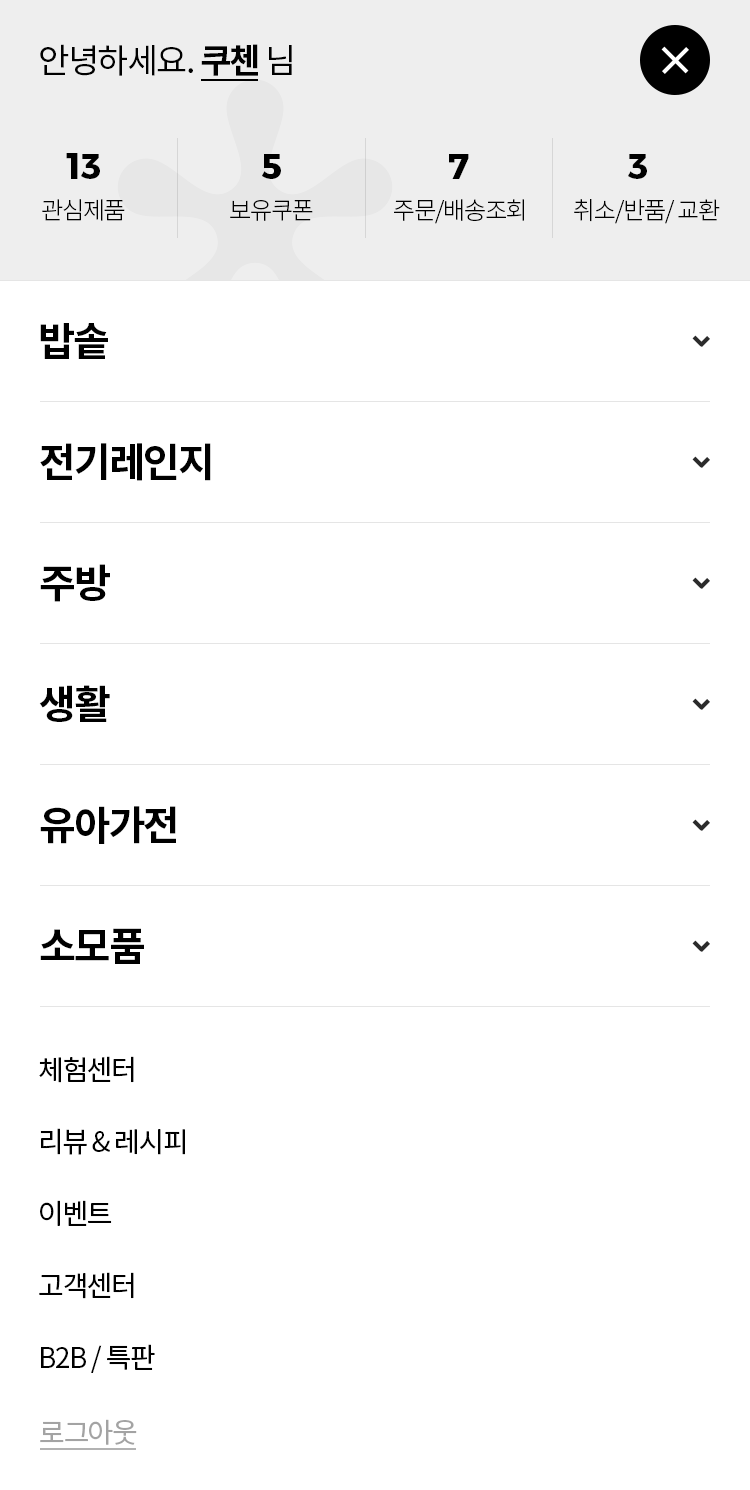
<style>
.page{position:relative;width:750px;height:1490px;background:#ffffff}
.page>*{position:absolute;margin:0}
.t1{font:34px "NotoSansCJKkr-Regular";letter-spacing:-0.05em;color:#000000}
.t2{font:34px "NotoSansCJKkr-Bold";letter-spacing:-0.05em;color:#000000}
.t3{font:36px "Montserrat-Bold";color:#000000}
.t4{font:24px "NotoSansCJKkr-Light";letter-spacing:-0.05em;color:#000000}
.t5{font:40px "NotoSansCJKkr-Bold";letter-spacing:-0.05em;color:#000000}
.t6{font:28px/72px "NotoSansCJKkr-Regular";letter-spacing:-0.05em;color:#000000}
.t7{font:28px "NotoSansCJKkr-Regular";letter-spacing:-0.05em;color:#a3a3a3}
</style>
<div class="page">
<p class="t1" style="left:40px;top:44px;width:252px;height:32px">안녕하세요. <span class="t2">쿠첸 </span>님</p>
<p class="t3" style="left:66px;top:153px;width:34px;height:26px">13</p>
<p class="t3" style="left:262px;top:154px;width:19px;height:25px">5</p>
<p class="t3" style="left:449px;top:154px;width:20px;height:25px">7</p>
<p class="t3" style="left:628px;top:154px;width:19px;height:25px">3</p>
<p class="t4" style="left:42px;top:199px;width:83px;height:22px">관심제품</p>
<p class="t4" style="left:230px;top:200px;width:83px;height:21px">보유쿠폰</p>
<p class="t4" style="left:394px;top:199px;width:130px;height:25px">주문/배송조회</p>
<p class="t4" style="left:574px;top:199px;width:146px;height:25px">취소/반품/ 교환</p>
<p class="t5" style="left:40px;top:323px;width:68px;height:36px">밥솥</p>
<p class="t5" style="left:40px;top:443px;width:171px;height:38px">전기레인지</p>
<p class="t5" style="left:40px;top:564px;width:70px;height:38px">주방</p>
<p class="t5" style="left:39px;top:685px;width:71px;height:37px">생활</p>
<p class="t5" style="left:40px;top:806px;width:136px;height:38px">유아가전</p>
<p class="t5" style="left:40px;top:928px;width:104px;height:36px">소모품</p>
<p class="t6" style="left:39px;top:1056px;width:146px;height:317px">체험센터<br>리뷰 &amp; 레시피<br>이벤트<br>고객센터<br>B2B / 특판</p>
<p class="t7" style="left:40px;top:1419px;width:97px;height:26px">로그아웃</p>
</div>
